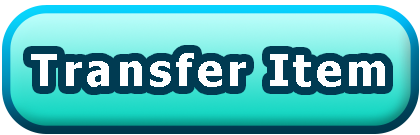
<style>
.page{position:relative;width:420px;height:135px}
.page>*{position:absolute;margin:0}
.t1{font:43.8px "Tahoma-Bold";letter-spacing:0.1em;color:#ffffff}
</style>
<div class="page">
<p class="t1" style="left:31px;top:53px;width:354px;height:34px">Transfer Item</p>
</div>
